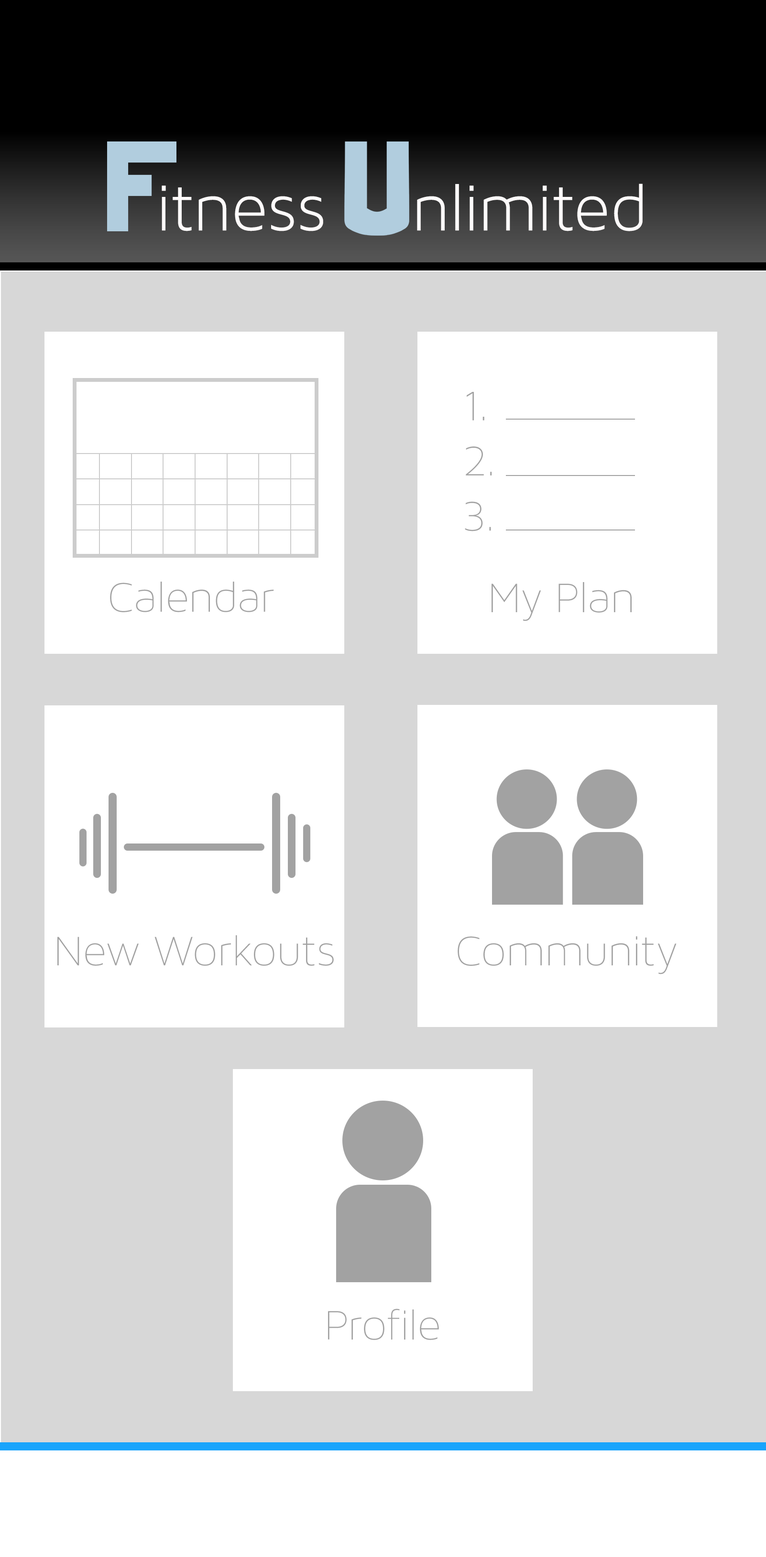
<style>
.page{position:relative;width:766px;height:1557px;background:#ffffff}
.page>*{position:absolute;margin:0}
.t1{font:68.9px "MavenProLight300-Regular";color:#fefbfb}
.t2{font:46px "MavenProLight200-Regular";color:#a2a2a2}
</style>
<div class="page">
<p class="t1" style="left:162px;top:184px;width:480px;height:47px">itness    nlimited</p>
<p class="t2" style="left:110px;top:582px;width:164px;height:30px">Calendar</p>
<p class="t2" style="left:491px;top:582px;width:140px;height:39px">My Plan</p>
<p class="t2" style="left:57px;top:935px;width:277px;height:31px">New Workouts</p>
<p class="t2" style="left:457px;top:936px;width:219px;height:39px">Community</p>
<p class="t2" style="left:328px;top:1309px;width:111px;height:31px">Profile</p>
</div>
